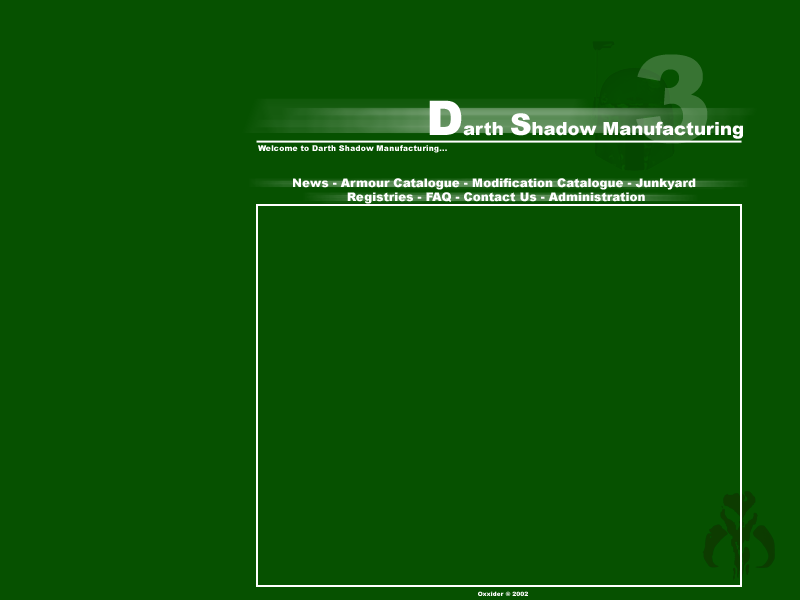
<style>
.page{position:relative;width:800px;height:600px;background:#065100}
.page>*{position:absolute;margin:0}
.t1{font:120px "Arial-Black"}
.t2{font:18px "Arial-Black";color:#ffffff}
.t3{font:48px "Arial-Black";color:#ffffff}
.t4{font:30px "Arial-Black";color:#ffffff}
.t5{font:8px "Arial-Black";color:#ffffff}
.t6{font:12px "Arial-Black";color:#ffffff}
.t7{font:6px "Arial-Black";color:#ffffff}
</style>
<div class="page">
<p class="t1" style="left:636px;top:54px;width:72px;height:90px">3</p>
<p class="t2" style="left:429px;top:100px;width:314px;height:39px"><span class="t3">D</span>arth <span class="t4">S</span>hadow Manufacturing</p>
<p class="t5" style="left:258px;top:145px;width:189px;height:8px">Welcome to Darth Shadow Manufacturing...</p>
<p class="t6" style="left:293px;top:178px;width:403px;height:26px;text-align:center">News - Armour Catalogue - Modification Catalogue - Junkyard <br> Registries - FAQ - Contact Us - Administration</p>
<p class="t7" style="left:478px;top:591px;width:50px;height:5px">Oxxider © 2002</p>
</div>
